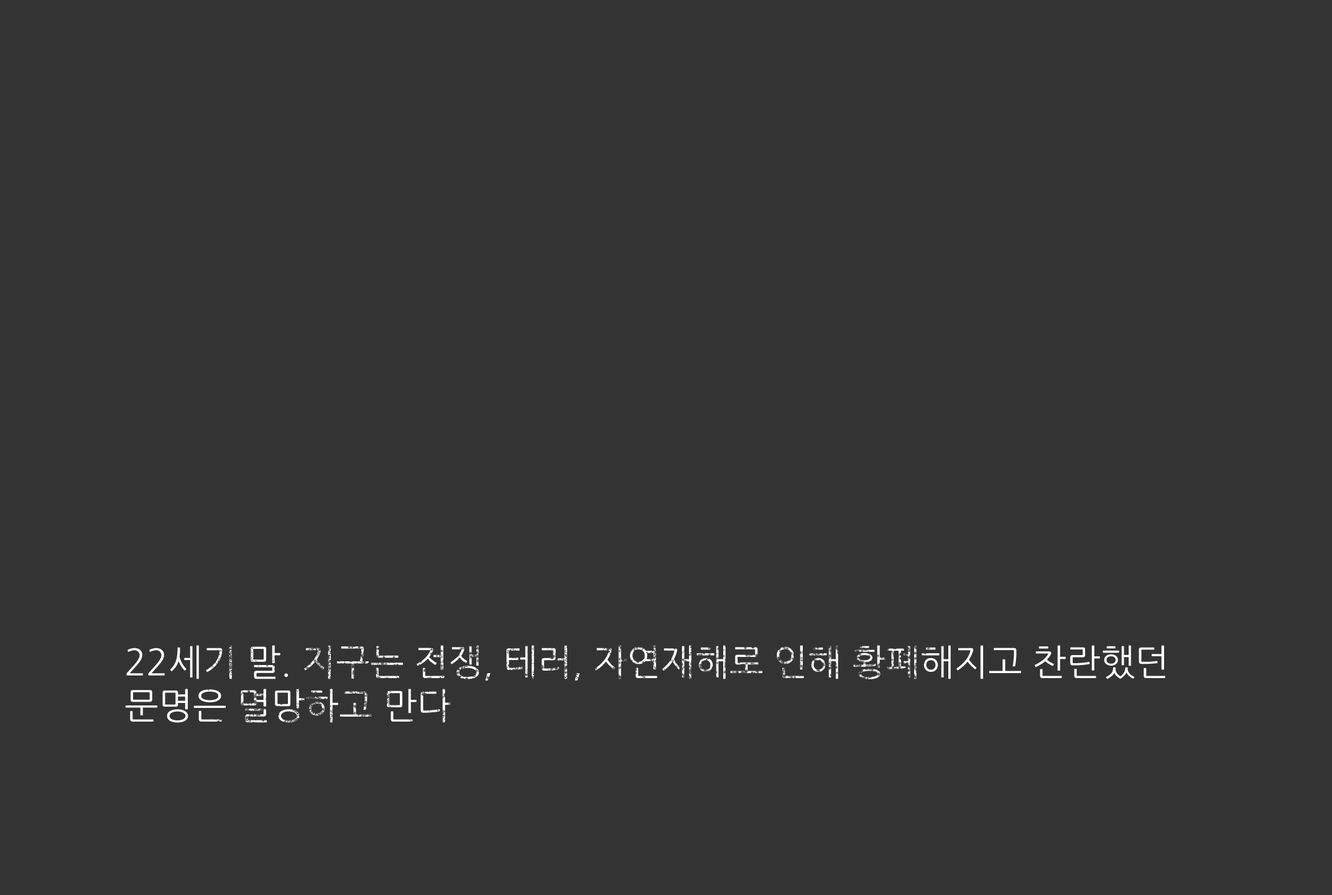
<style>
.page{position:relative;width:1332px;height:895px;background:#333333}
.page>*{position:absolute;margin:0}
.t1{font:36.3px "NanumGothic";color:#ffffff}
</style>
<div class="page">
<p class="t1" style="left:125px;top:645px;width:1040px;height:78px">22세기 말. 지구는 전쟁, 테러, 자연재해로 인해 황폐해지고 찬란했던 문명은 멸망하고 만다</p>
</div>
